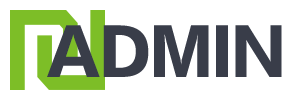
<style>
.page{position:relative;width:300px;height:100px;background:#ffffff}
.page>*{position:absolute;margin:0}
.t1{font:60px "FZLTTHK--GBK1-0";color:#393d49}
</style>
<div class="page">
<p class="t1" style="left:47px;top:25px;width:235px;height:52px">ADMIN</p>
</div>
